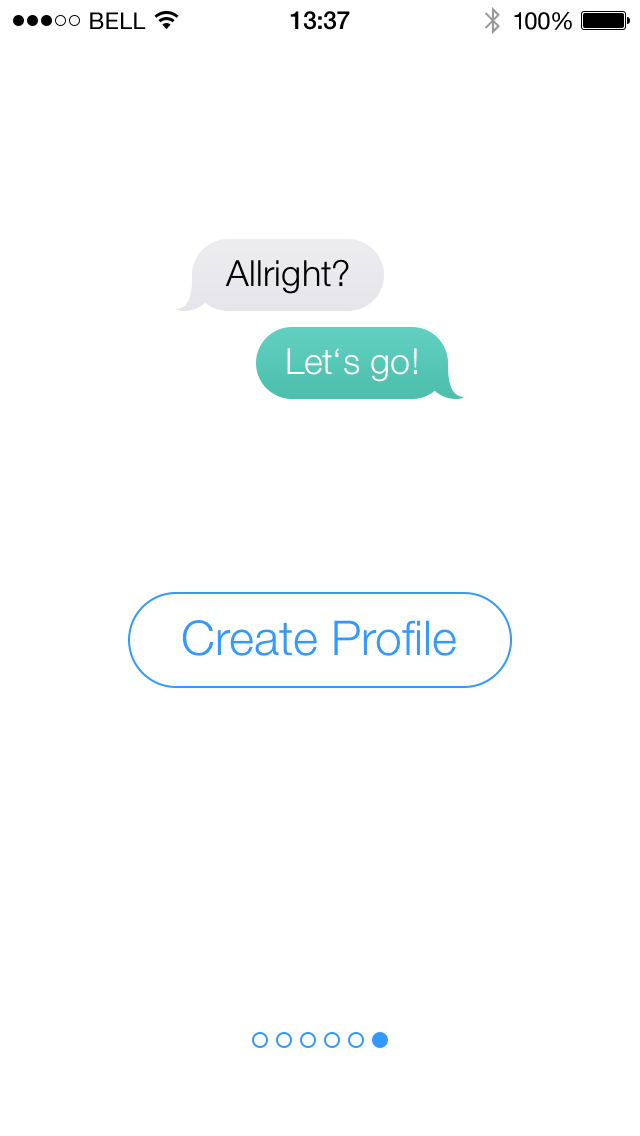
<style>
.page{position:relative;width:640px;height:1136px;background:#ffffff}
.page>*{position:absolute;margin:0}
.t1{font:36px "HelveticaNeue-Light";color:#000000}
.t2{font:36px "HelveticaNeue-Light";color:#ffffff}
.t3{font:48px "HelveticaNeue-Light";color:#3399ff}
</style>
<div class="page">
<p class="t1" style="left:225px;top:259px;width:124px;height:35px">Allright?</p>
<p class="t2" style="left:287px;top:348px;width:130px;height:34px">Let‘s go!</p>
<p class="t3" style="left:182px;top:620px;width:274px;height:36px">Create Profile</p>
</div>
